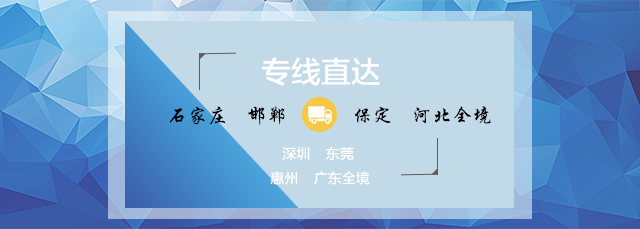
<style>
.page{position:relative;width:640px;height:229px;background:#c2d9e7}
.page>*{position:absolute;margin:0}
.t1{font:30px "FZLTZHK--GBK1-0";color:#ffffff}
.t2{font:20px "STXingkai";color:#000000}
.t3{font:14px "FZLTZHK--GBK1-0";color:#ffffff}
</style>
<div class="page">
<p class="t1" style="left:261px;top:57px;width:119px;height:29px">专线直达</p>
<p class="t2" style="left:170px;top:106px;width:115px;height:20px">石家庄    邯郸</p>
<p class="t2" style="left:355px;top:106px;width:136px;height:18px">保定    河北全境</p>
<p class="t3" style="left:270px;top:147px;width:100px;height:38px;text-align:center">深圳    东莞 <br>惠州    广东全境</p>
</div>
